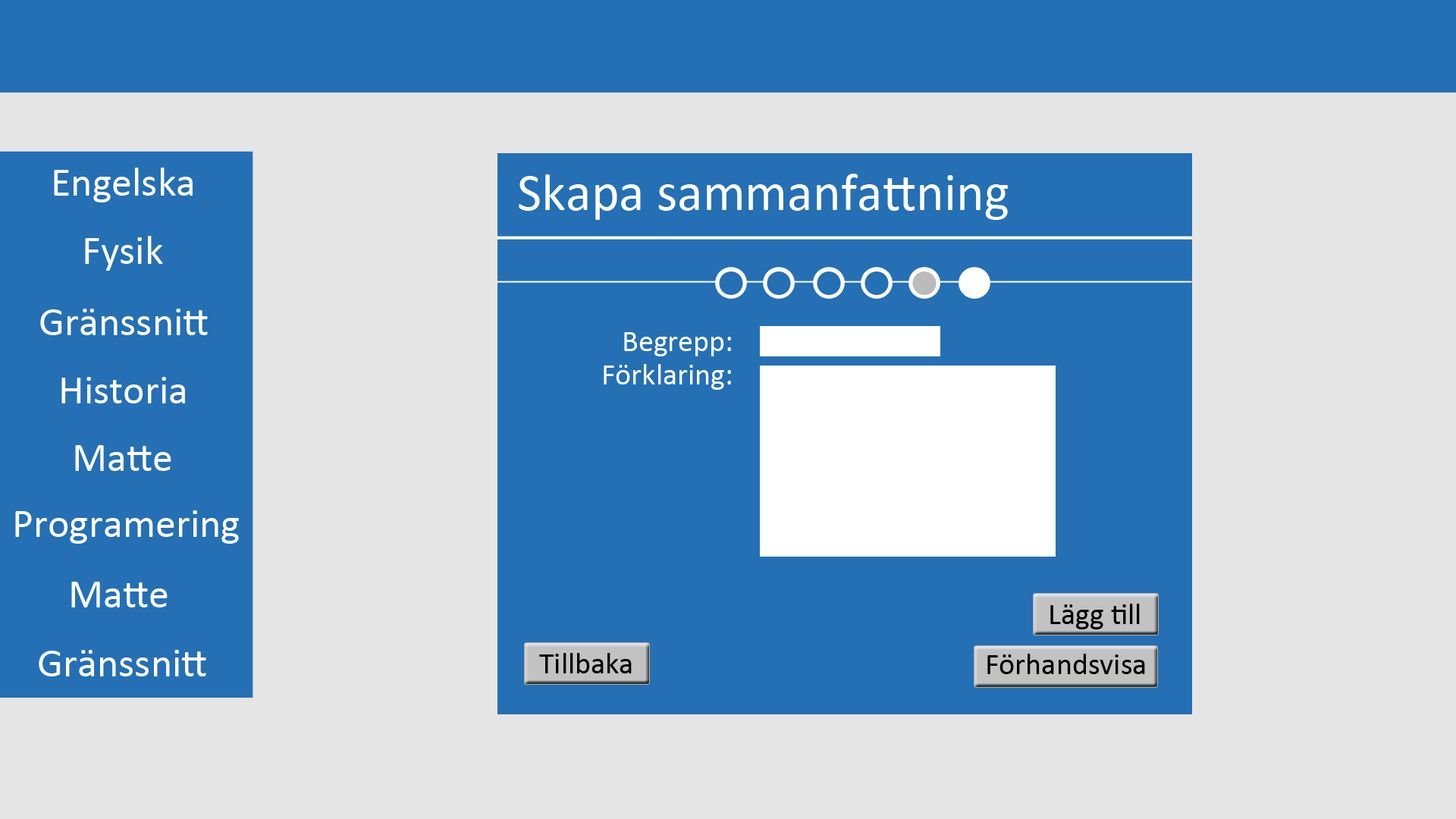
<style>
.page{position:relative;width:1456px;height:819px;background:#e5e5e5}
.page>*{position:absolute;margin:0}
.t1{font:41px "Calibri";color:#ffffff}
.t2{font:53.1px "Calibri";color:#fefefe}
.t3{font:30.3px "Calibri";color:#ffffff}
.t4{font:41px "Calibri";color:#fffdfd}
.t5{font:41px "Calibri";color:#fefefe}
.t6{font:30.3px "Calibri";color:#000000}
</style>
<div class="page">
<p class="t1" style="left:54px;top:168px;width:139px;height:34px">Engelska</p>
<p class="t2" style="left:519px;top:174px;width:489px;height:46px">Skapa sammanfattning</p>
<p class="t1" style="left:85px;top:236px;width:78px;height:35px">Fysik</p>
<p class="t1" style="left:40px;top:309px;width:168px;height:26px">Gränssnitt</p>
<p class="t3" style="left:624px;top:332px;width:107px;height:24px">Begrepp:</p>
<p class="t3" style="left:604px;top:364px;width:127px;height:26px">Förklaring:</p>
<p class="t4" style="left:61px;top:377px;width:124px;height:26px">Historia</p>
<p class="t5" style="left:75px;top:445px;width:96px;height:26px">Matte</p>
<p class="t1" style="left:15px;top:510px;width:224px;height:34px">Programering</p>
<p class="t1" style="left:71px;top:582px;width:97px;height:25px">Matte</p>
<p class="t6" style="left:1050px;top:604px;width:90px;height:25px">Lägg till</p>
<p class="t1" style="left:39px;top:650px;width:167px;height:26px">Gränssnitt</p>
<p class="t6" style="left:539px;top:653px;width:93px;height:20px">Tillbaka</p>
<p class="t6" style="left:987px;top:654px;width:158px;height:20px">Förhandsvisa</p>
</div>
